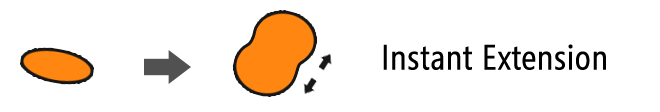
<style>
.page{position:relative;width:660px;height:112px;background:#ffffff}
.page>*{position:absolute;margin:0}
.t1{font:35px "SegoeCondensed";color:#000000;font-weight:bold}
</style>
<div class="page">
<p class="t1" style="left:383px;top:44px;width:223px;height:26px">Instant Extension</p>
</div>
